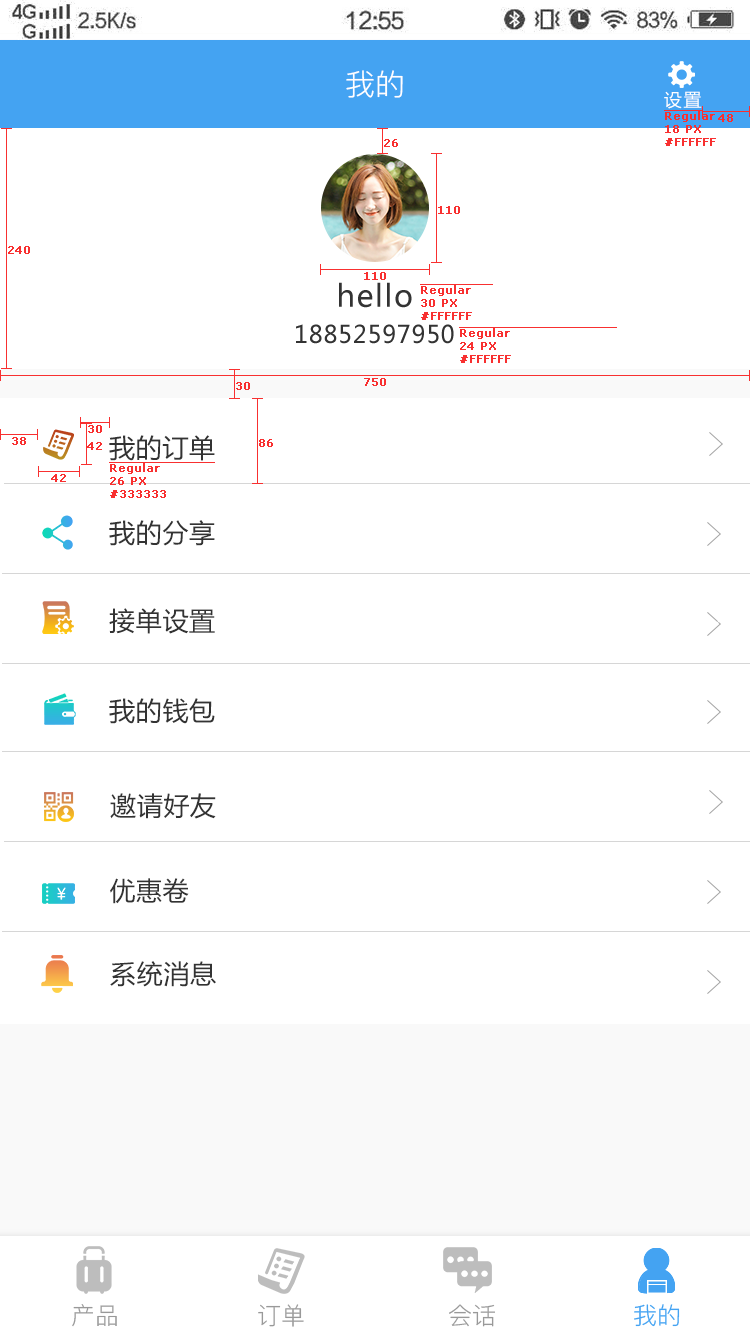
<style>
.page{position:relative;width:750px;height:1334px;background:#ffffff}
.page>*{position:absolute;margin:0}
.t1{font:30px "PingFang-SC-Regular";color:#ffffff;text-transform:uppercase}
.t2{font:18px "MicrosoftYaHei";letter-spacing:0.1em;color:#ffffff}
.t3{font:11px "Verdana";color:#f83030;font-weight:bold}
.t4{font:30px "MicrosoftYaHei";letter-spacing:0.05em;color:#333333}
.t5{font:24px "MicrosoftYaHei";letter-spacing:0.025em;color:#333333}
.t6{font:26px "MicrosoftYaHei";letter-spacing:0.025em;color:#333333}
.t7{font:24px "PingFang-SC-Regular";color:#999999;text-transform:uppercase}
.t8{font:24px "PingFang-SC-Regular";color:#44a3f2;text-transform:uppercase}
</style>
<div class="page">
<p class="t1" style="left:346px;top:70px;width:57px;height:28px">我的</p>
<p class="t2" style="left:664px;top:91px;width:38px;height:18px">设置</p>
<p class="t3" style="left:665px;top:111px;width:51px;height:35px">Regular<br>18 PX<br>#FFFFFF</p>
<p class="t3" style="left:718px;top:114px;width:15px;height:8px">48</p>
<p class="t3" style="left:384px;top:139px;width:14px;height:8px">26</p>
<p class="t3" style="left:438px;top:206px;width:22px;height:8px">110</p>
<p class="t3" style="left:8px;top:246px;width:22px;height:8px">240</p>
<p class="t3" style="left:364px;top:272px;width:22px;height:8px">110</p>
<p class="t4" style="left:339px;top:282px;width:73px;height:26px">hello</p>
<p class="t3" style="left:421px;top:285px;width:51px;height:35px">Regular<br>30 PX<br>#FFFFFF</p>
<p class="t5" style="left:296px;top:324px;width:158px;height:20px">18852597950</p>
<p class="t3" style="left:460px;top:328px;width:51px;height:35px">Regular<br>24 PX<br>#FFFFFF</p>
<p class="t3" style="left:236px;top:382px;width:14px;height:8px">30</p>
<p class="t3" style="left:364px;top:378px;width:22px;height:8px">750</p>
<p class="t3" style="left:88px;top:425px;width:14px;height:8px">30</p>
<p class="t3" style="left:12px;top:437px;width:14px;height:8px">38</p>
<p class="t6" style="left:109px;top:435px;width:106px;height:26px">我的订单</p>
<p class="t3" style="left:87px;top:442px;width:15px;height:8px">42</p>
<p class="t3" style="left:259px;top:439px;width:14px;height:8px">86</p>
<p class="t3" style="left:110px;top:463px;width:56px;height:35px">Regular<br>26 PX<br>#333333</p>
<p class="t3" style="left:51px;top:474px;width:15px;height:8px">42</p>
<p class="t6" style="left:109px;top:520px;width:106px;height:26px">我的分享</p>
<p class="t6" style="left:109px;top:608px;width:106px;height:26px">接单设置</p>
<p class="t6" style="left:109px;top:698px;width:106px;height:26px">我的钱包</p>
<p class="t6" style="left:110px;top:793px;width:106px;height:26px">邀请好友</p>
<p class="t6" style="left:110px;top:878px;width:79px;height:26px">优惠卷</p>
<p class="t6" style="left:110px;top:961px;width:106px;height:26px">系统消息</p>
<p class="t7" style="left:72px;top:1304px;width:45px;height:23px">产品</p>
<p class="t7" style="left:258px;top:1304px;width:46px;height:23px">订单</p>
<p class="t7" style="left:449px;top:1304px;width:46px;height:23px">会话</p>
<p class="t8" style="left:634px;top:1304px;width:46px;height:23px">我的</p>
</div>
